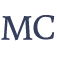
<style>
.page{position:relative;width:57px;height:57px;background:#ffffff}
.page>*{position:absolute;margin:0}
.t1{font:35.6px "Buenard-Regular";letter-spacing:-0.005em;color:#353e5b}
</style>
<div class="page">
<p class="t1" style="left:1px;top:16px;width:32px;height:25px">M</p>
<p class="t1" style="left:33px;top:15px;width:22px;height:25px">C</p>
</div>
